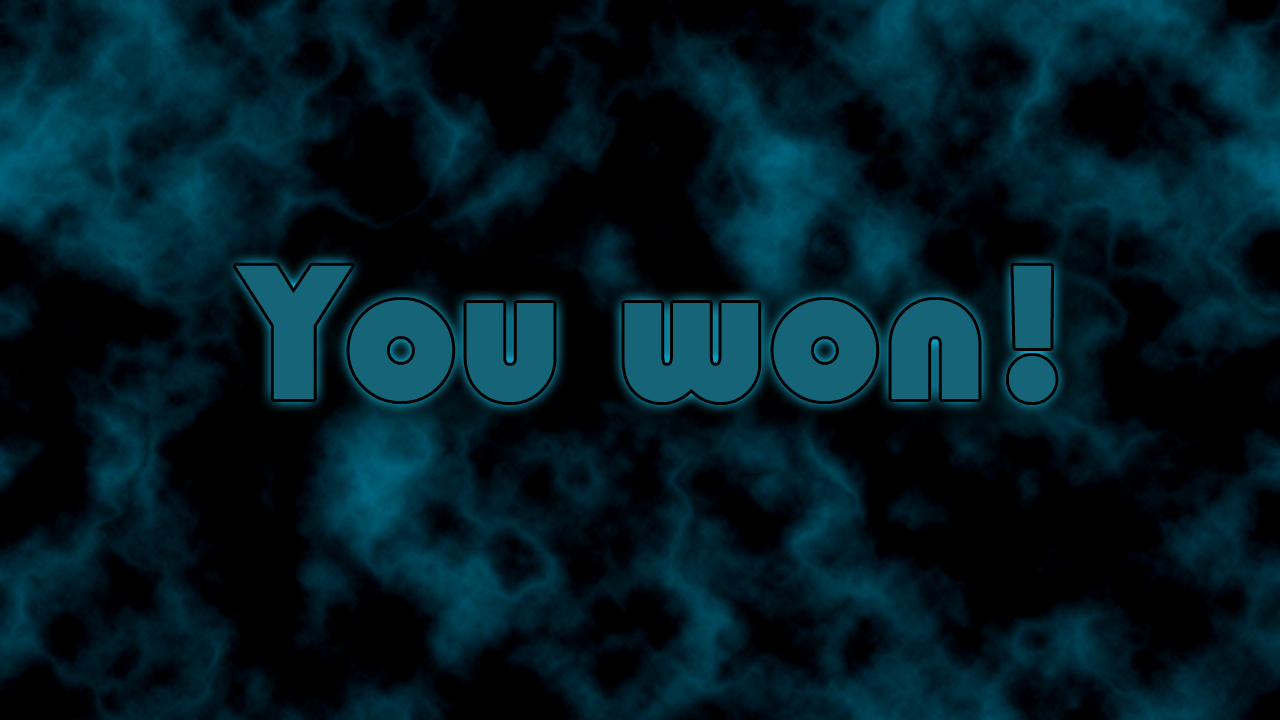
<style>
.page{position:relative;width:1280px;height:720px;background:#000000}
.page>*{position:absolute;margin:0}
.t1{font:200px "Bauhaus93";color:#166477}
</style>
<div class="page">
<p class="t1" style="left:236px;top:265px;width:820px;height:137px">You won!</p>
</div>
